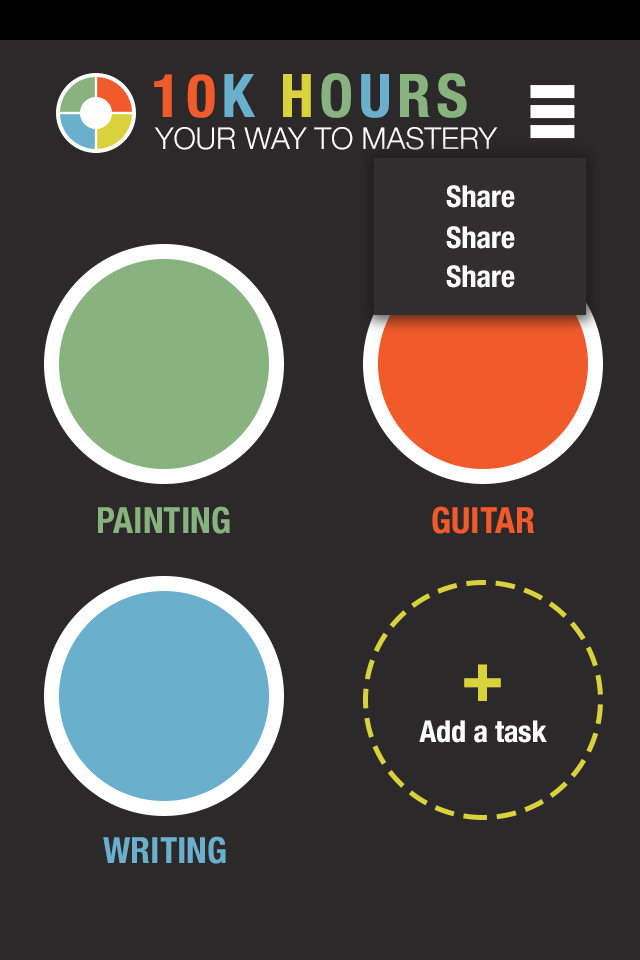
<style>
.page{position:relative;width:640px;height:960px;background:#2b2929}
.page>*{position:absolute;margin:0}
.t1{font:60px "HelveticaNeue-CondensedBold";letter-spacing:0.1em;color:#f15a2a}
.t2{font:60px "HelveticaNeue-CondensedBold";letter-spacing:0.1em;color:#6aafcc}
.t3{font:60px "HelveticaNeue-CondensedBold";letter-spacing:0.1em;color:#dad23d}
.t4{font:60px "HelveticaNeue-CondensedBold";letter-spacing:0.1em;color:#88b27e}
.t5{font:30px "HelveticaNeue-Light";color:#ffffff}
.t6{font:30px "HelveticaNeue-CondensedBold";color:#ffffff}
.t7{font:36px "HelveticaNeue-CondensedBold";color:#88b27e}
.t8{font:36px "HelveticaNeue-CondensedBold";color:#f15a2a}
.t9{font:72px "HelveticaNeue-CondensedBold";color:#dad23d}
.t10{font:30px "HelveticaNeue-CondensedBold";color:#dad23d}
.t11{font:36px "HelveticaNeue-CondensedBold";color:#6aafcc}
</style>
<div class="page">
<p class="t1" style="left:154px;top:73px;width:313px;height:45px">10<span class="t2">K </span><span class="t3">H</span><span class="t4">O</span><span class="t2">U</span><span class="t4">RS</span></p>
<p class="t5" style="left:154px;top:127px;width:344px;height:23px">YOUR WAY TO MASTERY</p>
<p class="t6" style="left:446px;top:185px;width:69px;height:23px">Share</p>
<p class="t6" style="left:446px;top:226px;width:69px;height:23px">Share</p>
<p class="t6" style="left:446px;top:265px;width:69px;height:23px">Share</p>
<p class="t7" style="left:98px;top:506px;width:132px;height:28px">PAINTING</p>
<p class="t8" style="left:432px;top:506px;width:103px;height:28px">GUITAR</p>
<p class="t9" style="left:464px;top:664px;width:37px;height:37px">+</p>
<p class="t6" style="left:419px;top:720px;width:128px;height:23px"><span class="t10"><br></span>Add a task</p>
<p class="t11" style="left:103px;top:836px;width:123px;height:28px">WRITING</p>
</div>
